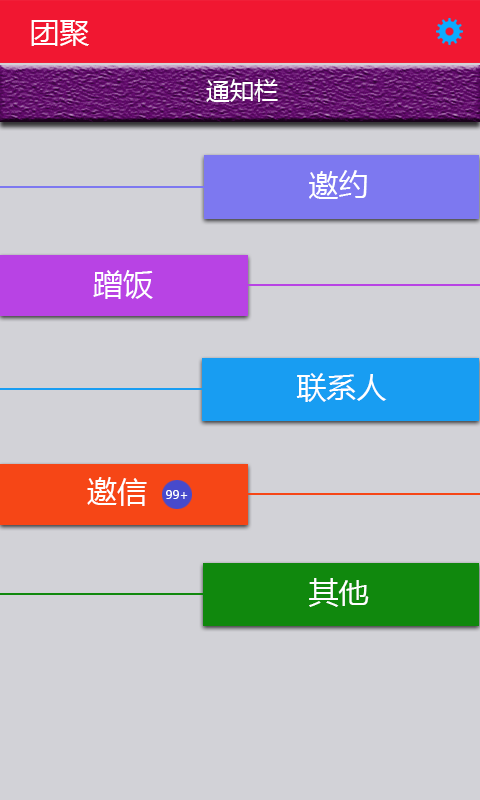
<style>
.page{position:relative;width:480px;height:800px;background:#d2d2d7}
.page>*{position:absolute;margin:0}
.t1{font:30px "MicrosoftYaHei";color:#ffffff}
.t2{font:24px "MicrosoftYaHei";color:#ffffff}
.t3{font:12px "MicrosoftYaHei";color:#fefefe}
</style>
<div class="page">
<p class="t1" style="left:31px;top:20px;width:58px;height:26px">团聚</p>
<p class="t2" style="left:206px;top:79px;width:72px;height:23px">通知栏</p>
<p class="t1" style="left:309px;top:170px;width:58px;height:29px">邀约</p>
<p class="t1" style="left:93px;top:270px;width:60px;height:29px">蹭饭</p>
<p class="t1" style="left:296px;top:373px;width:91px;height:29px">联系人</p>
<p class="t1" style="left:87px;top:477px;width:60px;height:29px">邀信</p>
<p class="t3" style="left:166px;top:490px;width:22px;height:9px">99+</p>
<p class="t1" style="left:309px;top:578px;width:60px;height:29px">其他</p>
</div>
